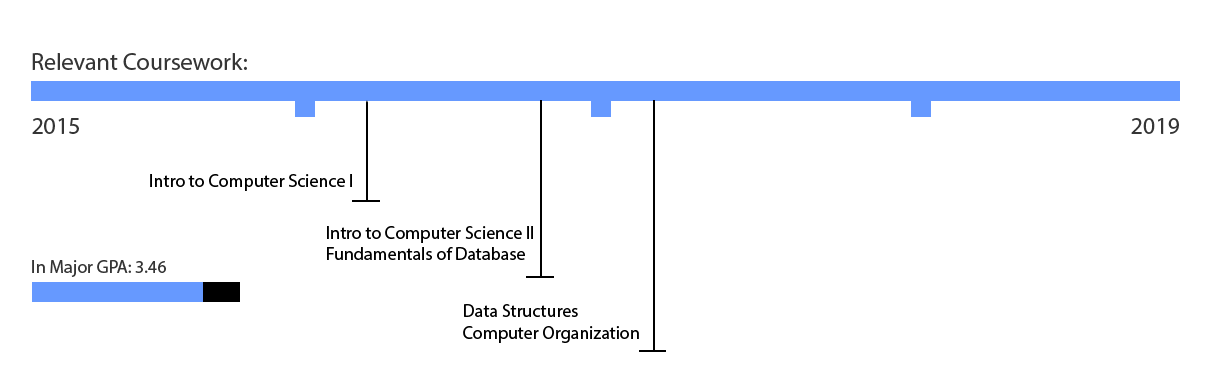
<style>
.page{position:relative;width:1213px;height:390px;background:#ffffff}
.page>*{position:absolute;margin:0}
.t1{font:24px "MyriadPro-Regular";color:#353535}
.t2{font:18px "MyriadPro-Regular";color:#000000}
.t3{font:18px "MyriadPro-Regular";color:#353535}
</style>
<div class="page">
<p class="t1" style="left:32px;top:53px;width:215px;height:17px">Relevant Coursework:</p>
<p class="t1" style="left:32px;top:118px;width:47px;height:16px">2015</p>
<p class="t1" style="left:1131px;top:118px;width:48px;height:16px">2019</p>
<p class="t2" style="left:150px;top:174px;width:202px;height:17px">Intro to Computer Science I</p>
<p class="t2" style="left:327px;top:226px;width:206px;height:34px">Intro to Computer Science II<br>Fundamentals of Database</p>
<p class="t3" style="left:32px;top:260px;width:134px;height:17px">In Major GPA: 3.46</p>
<p class="t2" style="left:463px;top:304px;width:176px;height:39px">Data Structures<br>Computer Organization</p>
</div>
